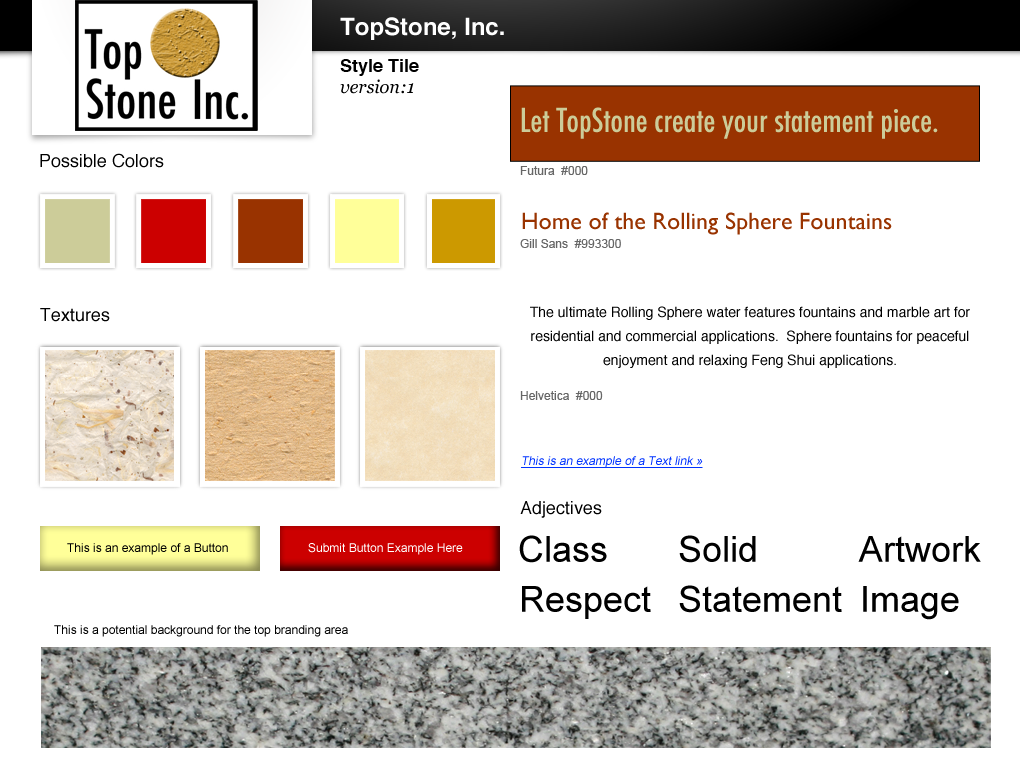
<style>
.page{position:relative;width:1020px;height:760px;background:#ffffff}
.page>*{position:absolute;margin:0}
.t1{font:24px "Helvetica-Bold";color:#ffffff}
.t2{font:18px "Helvetica-Bold";color:#000000}
.t3{font:18px "Georgia-Italic";color:#000000}
.t4{font:32px "Futura-CondensedMedium";color:#cccc99}
.t5{font:18px "Helvetica";color:#000000}
.t6{font:12px "ArialMT";color:#666666}
.t7{font:24px "GillSans";color:#993300}
.t8{font:14px/24px "Helvetica";color:#000000}
.t9{font:14px/30px "Helvetica";color:#000000}
.t10{font:12px "ArialMT";color:#0033ff;font-style:italic;text-decoration:underline}
.t11{font:12px "ArialMT";color:#000000}
.t12{font:12px "ArialMT";color:#ffffff}
.t13{font:36px "ArialMT";color:#000000}
</style>
<div class="page">
<p class="t1" style="left:340px;top:17px;width:164px;height:23px">TopStone, Inc.</p>
<p class="t2" style="left:340px;top:59px;width:79px;height:17px">Style Tile</p>
<p class="t3" style="left:340px;top:79px;width:74px;height:15px">version:1</p>
<p class="t4" style="left:521px;top:107px;width:417px;height:32px">Let TopStone create your statement piece.</p>
<p class="t5" style="left:40px;top:153px;width:124px;height:15px">Possible Colors</p>
<p class="t6" style="left:520px;top:166px;width:68px;height:9px">Futura  #000</p>
<p class="t7" style="left:522px;top:212px;width:370px;height:23px">Home of the Rolling Sphere Fountains</p>
<p class="t6" style="left:520px;top:239px;width:101px;height:9px">Gill Sans  #993300</p>
<p class="t5" style="left:40px;top:308px;width:70px;height:14px">Textures</p>
<p class="t8" style="left:530px;top:306px;width:440px;height:62px;text-align:center"><span class="t9"><br></span>The ultimate Rolling Sphere water features fountains and marble art for residential and commercial applications.  Sphere fountains for peaceful enjoyment and relaxing Feng Shui applications.</p>
<p class="t6" style="left:520px;top:391px;width:83px;height:9px">Helvetica  #000</p>
<p class="t10" style="left:521px;top:456px;width:182px;height:12px">This is an example of a Text link »</p>
<p class="t5" style="left:520px;top:501px;width:82px;height:17px">Adjectives</p>
<p class="t11" style="left:67px;top:543px;width:161px;height:12px">This is an example of a Button</p>
<p class="t12" style="left:308px;top:543px;width:155px;height:12px">Submit Button Example Here</p>
<p class="t13" style="left:519px;top:535px;width:88px;height:28px">Class</p>
<p class="t13" style="left:679px;top:535px;width:77px;height:28px">Solid</p>
<p class="t13" style="left:858px;top:536px;width:123px;height:26px">Artwork</p>
<p class="t13" style="left:522px;top:586px;width:129px;height:33px">Respect</p>
<p class="t13" style="left:679px;top:585px;width:163px;height:28px">Statement</p>
<p class="t13" style="left:863px;top:586px;width:96px;height:34px">Image</p>
<p class="t11" style="left:54px;top:625px;width:294px;height:12px">This is a potential background for the top branding area</p>
</div>
